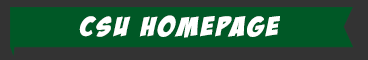
<style>
.page{position:relative;width:368px;height:60px;background:#005826}
.page>*{position:absolute;margin:0}
.t1{font:26.9px "BadaBoomBB";letter-spacing:0.1em;color:#ffffff;scale:1.22 1}
</style>
<div class="page">
<p class="t1" style="left:79px;top:15px;width:201px;height:23px">CSU Homepage</p>
</div>
